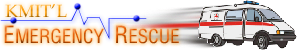
<style>
.page{position:relative;width:300px;height:50px;background:#ffffff}
.page>*{position:absolute;margin:0}
.t1{font:17.6px "BookAntiqua"}
.t2{font:35.3px "XJS-SynjaiAllcaps"}
</style>
<div class="page">
<p class="t1" style="left:5px;top:4px;width:62px;height:14px">KMIT’L</p>
<p class="t2" style="left:4px;top:25px;width:175px;height:19px">Emergency Rescue</p>
</div>
